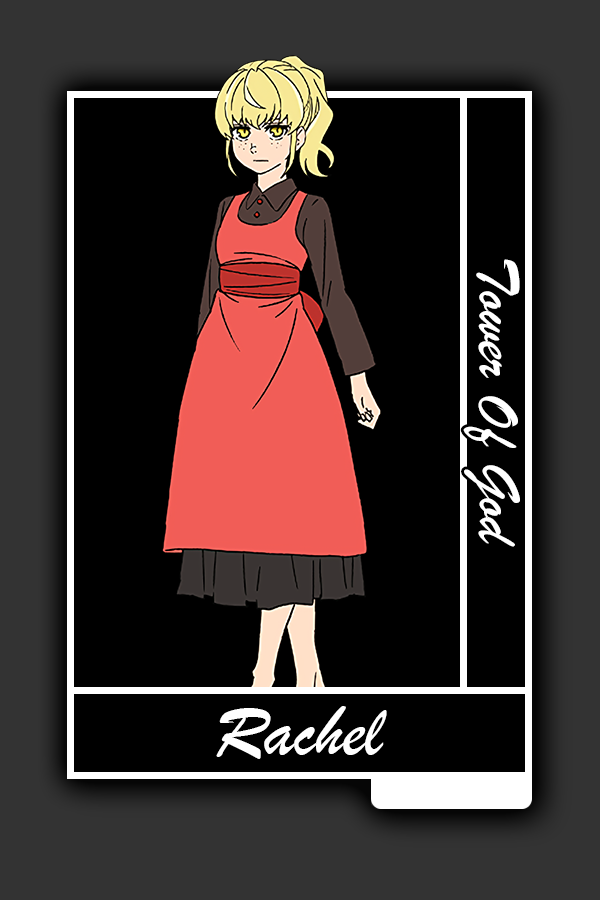
<style>
.page{position:relative;width:600px;height:900px;background:#000000}
.page>*{position:absolute;margin:0}
.t1{font:61.5px "BrushScriptMT";color:#ffffff}
.t2{font:75px "BrushScriptMT";color:#ffffff}
</style>
<div class="page">
<p class="t1" style="left:463px;top:259px;width:57px;height:288px;rotate:90deg">Tower Of God</p>
<p class="t2" style="left:216px;top:706px;width:171px;height:53px">Rachel</p>
</div>
